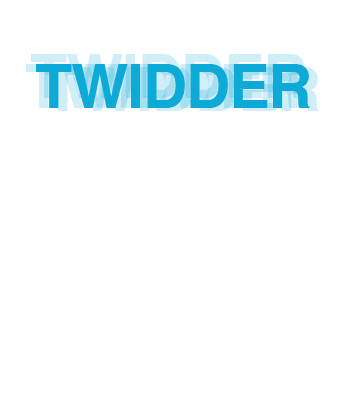
<style>
.page{position:relative;width:340px;height:400px;background:#ffffff}
.page>*{position:absolute;margin:0}
.t1{font:40px "HelveticaNeue-Light";letter-spacing:-0.02em;color:#ffffff}
.t2{font:61px "Helvetica-Bold";letter-spacing:-0.02em;color:#0eaad7}
</style>
<div class="page">
<p class="t1" style="left:25px;top:64px;width:297px;height:222px;text-align:center"><span class="t2">TWIDDER<br> <br></span>Socialize with<br>other bosses<br>around the world!</p>
</div>
